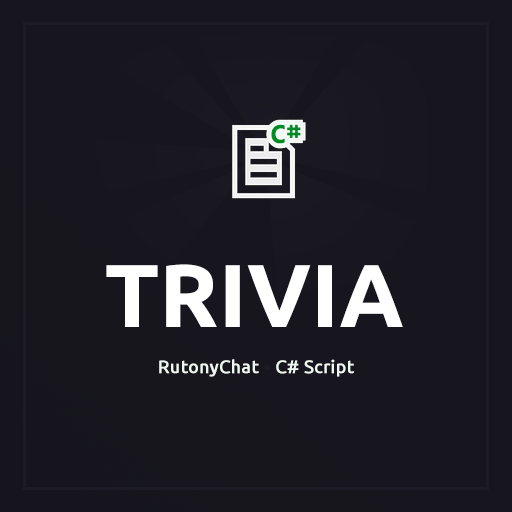
<style>
.page{position:relative;width:512px;height:512px;background:#17161e}
.page>*{position:absolute;margin:0}
.t1{font:89px "Ubuntu-Bold";color:#ffffff;text-transform:uppercase}
.t2{font:18px "Ubuntu";color:#eff7f1;font-weight:bold}
.t3{font:18px "Ubuntu";color:#1d1c26;font-weight:bold}
</style>
<div class="page">
<p class="t1" style="left:106px;top:264px;width:297px;height:63px">TRIVIA</p>
<p class="t2" style="left:159px;top:359px;width:195px;height:18px">RutonyChat<span class="t3"> • </span>C# Script</p>
<p class="t2" style="left:159px;top:359px;width:195px;height:18px">RutonyChat<span class="t3"> • </span>C# Script</p>
</div>
